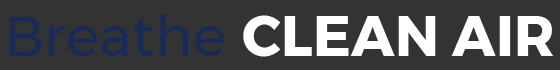
<style>
.page{position:relative;width:560px;height:70px;background:#333333}
.page>*{position:absolute;margin:0}
.t1{font:56.2px "Montserrat-Regular";letter-spacing:0.005em;color:#182a58}
.t2{font:56.2px "Montserrat-Bold";letter-spacing:0.005em;color:#ffffff}
</style>
<div class="page">
<p class="t1" style="left:9px;top:14px;width:215px;height:42px">Breathe</p>
<p class="t2" style="left:243px;top:15px;width:311px;height:42px">CLEAN AIR</p>
</div>
